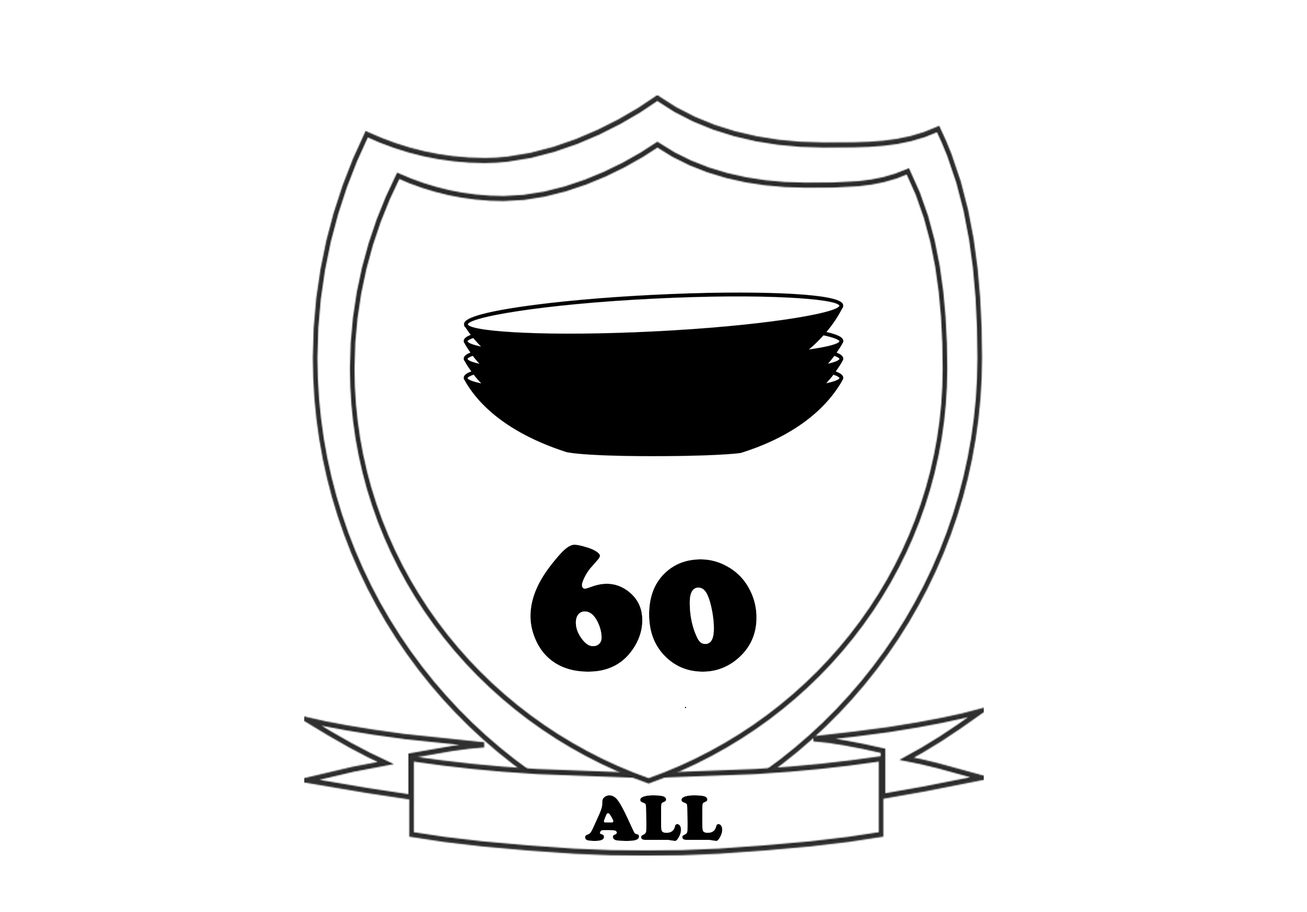
<style>
.page{position:relative;width:1307px;height:912px;background:#ffffff}
.page>*{position:absolute;margin:0}
.t1{font:195.3px "CooperBlack";color:#000000}
.t2{font:65.1px "CooperBlack";color:#000000}
</style>
<div class="page">
<p class="t1" style="left:531px;top:545px;width:226px;height:127px">60</p>
<p class="t2" style="left:585px;top:795px;width:138px;height:46px">ALL</p>
</div>
